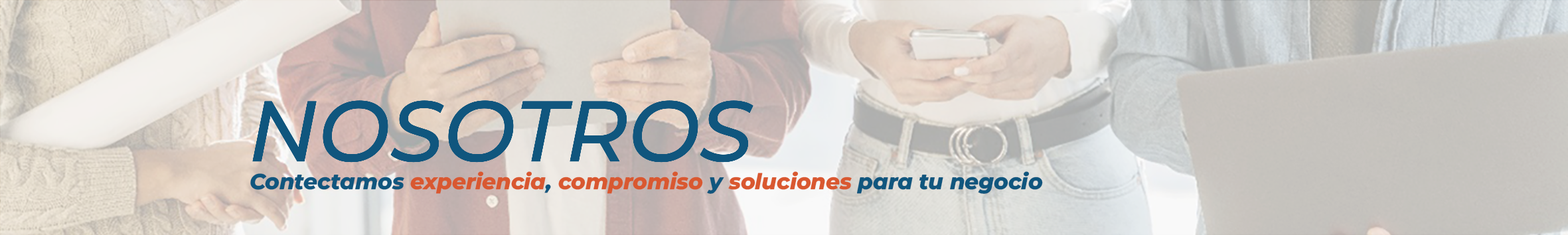
<style>
.page{position:relative;width:1568px;height:235px}
.page>*{position:absolute;margin:0}
.t1{font:85.9px "MontserratItalic-MediumItalic";color:#10567e}
.t2{font:21.7px "MontserratItalic-ExtraBoldItalic";color:#10567e}
.t3{font:21.7px "MontserratItalic-ExtraBoldItalic";color:#d95830}
</style>
<div class="page">
<p class="t1" style="left:252px;top:100px;width:501px;height:63px">NOSOTROS</p>
<p class="t2" style="left:250px;top:171px;width:793px;height:23px">Contectamos <span class="t3">experiencia</span>, <span class="t3">compromiso </span>y <span class="t3">soluciones </span>para tu negocio</p>
</div>
